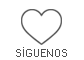
<style>
.page{position:relative;width:84px;height:60px;background:#ffffff}
.page>*{position:absolute;margin:0}
.t1{font:11px "Roboto-Thin";color:#4f4f4f}
</style>
<div class="page">
<p class="t1" style="left:16px;top:47px;width:51px;height:10px">SÍGUENOS</p>
</div>
